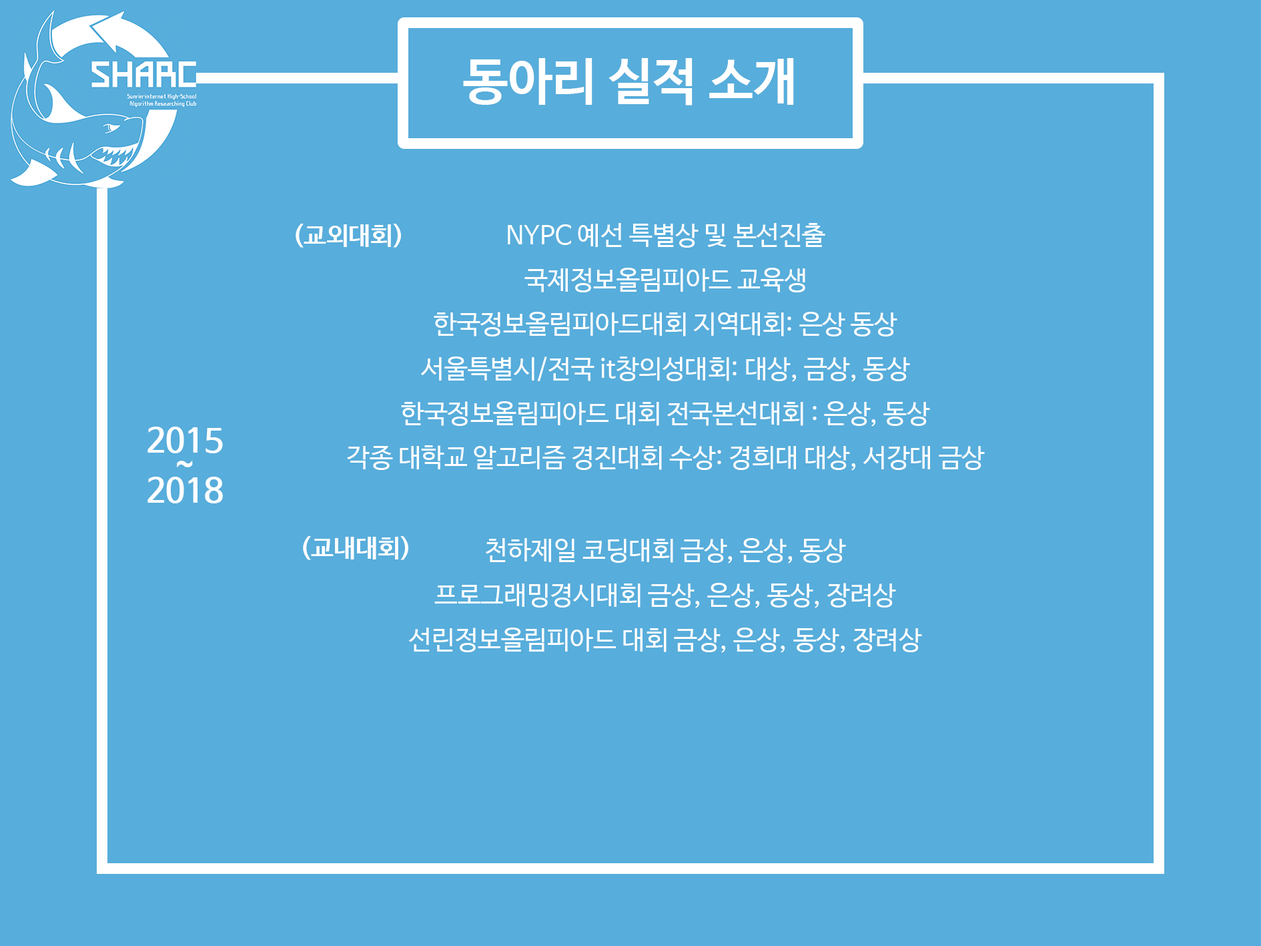
<style>
.page{position:relative;width:1261px;height:946px;background:#57addb}
.page>*{position:absolute;margin:0}
.t1{font:50px "NanumBarunGothicBold";color:#ffffff}
.t2{font:25px "NanumBarunGothicBold";color:#ffffff}
.t3{font:25.9px/44.5px "NanumBarunGothic";color:#ffffff}
.t4{font:33.4px/25px "NanumBarunGothicBold";color:#ffffff}
</style>
<div class="page">
<p class="t1" style="left:463px;top:58px;width:331px;height:47px">동아리 실적 소개</p>
<p class="t2" style="left:296px;top:224px;width:105px;height:24px">(교외대회)</p>
<p class="t3" style="left:347px;top:223px;width:638px;height:247px;text-align:center">NYPC 예선 특별상 및 본선진출<br>국제정보올림피아드 교육생<br>한국정보올림피아드대회 지역대회: 은상 동상<br>서울특별시/전국 it창의성대회: 대상, 금상, 동상<br>한국정보올림피아드 대회 전국본선대회 : 은상, 동상<br>각종 대학교 알고리즘 경진대회 수상: 경희대 대상, 서강대 금상</p>
<p class="t4" style="left:147px;top:426px;width:76px;height:77px;text-align:center">2015<br>~<br>2018</p>
<p class="t2" style="left:303px;top:536px;width:105px;height:24px">(교내대회)</p>
<p class="t3" style="left:408px;top:538px;width:514px;height:115px;text-align:center">천하제일 코딩대회 금상, 은상, 동상<br>프로그래밍경시대회 금상, 은상, 동상, 장려상<br>선린정보올림피아드 대회 금상, 은상, 동상, 장려상</p>
</div>
